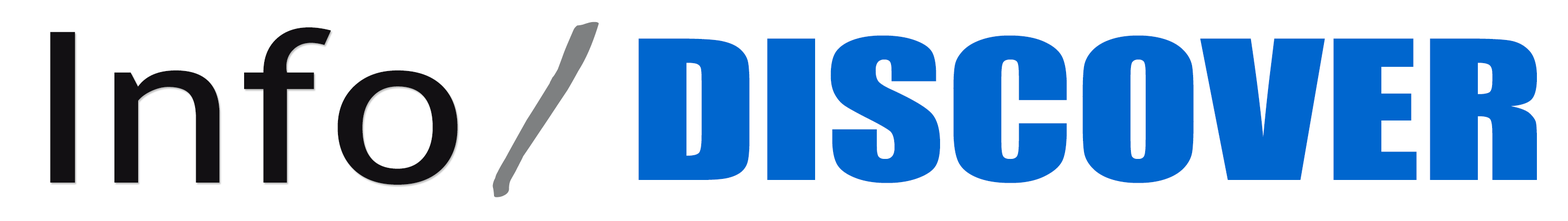
<style>
.page{position:relative;width:1568px;height:221px;background:#ffffff}
.page>*{position:absolute;margin:0}
.t1{font:210.9px "TrebuchetMS";color:#121013;scale:1.2 1}
.t2{font:232px "Mistral";color:#7e8081;scale:1.2 1}
.t3{font:179.3px "Impact";color:#0066ce;scale:1.3 1}
</style>
<div class="page">
<p class="t1" style="left:50px;top:27px;width:408px;height:158px">Info</p>
<p class="t2" style="left:492px;top:22px;width:107px;height:176px">/</p>
<p class="t3" style="left:638px;top:35px;width:899px;height:148px">DISCOVER</p>
</div>
